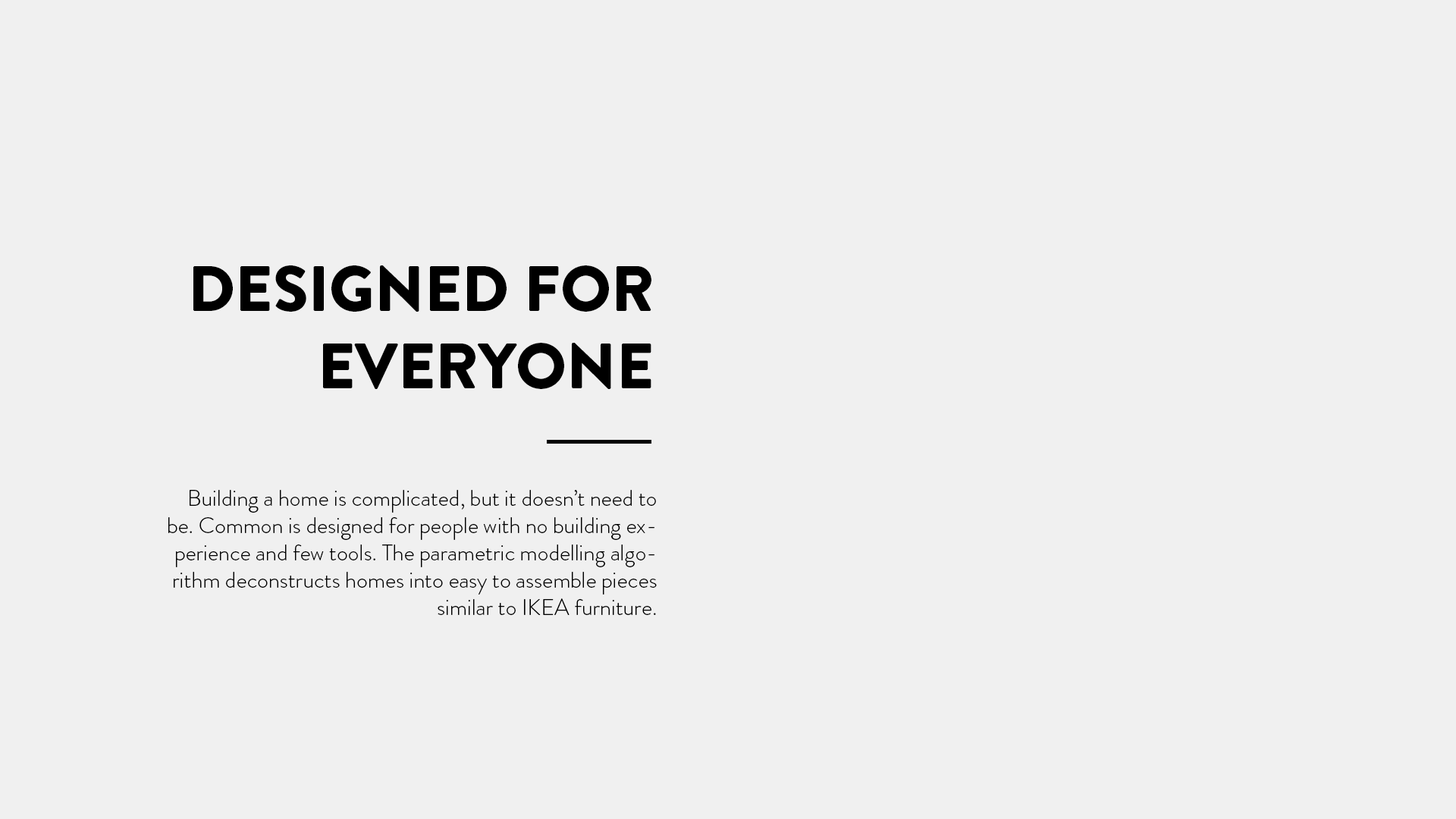
<style>
.page{position:relative;width:1456px;height:819px;background:#f0f0f0}
.page>*{position:absolute;margin:0}
.t1{font:64.4px "BrandonGrotesque-Black";color:#000000}
.t2{font:22.7px "BrandonGrotesque-Light";color:#000000}
</style>
<div class="page">
<p class="t1" style="left:193px;top:265px;width:458px;height:124px;text-align:right">DESIGNED FOR<br>EVERYONE</p>
<p class="t2" style="left:168px;top:490px;width:489px;height:125px;text-align:right">Building a home is complicated, but it doesn’t need to be. Common is designed for people with no building experience and few tools. The parametric modelling algorithm deconstructs homes into easy to assemble pieces similar to IKEA furniture.</p>
</div>
